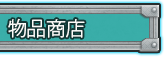
<style>
.page{position:relative;width:164px;height:57px}
.page>*{position:absolute;margin:0}
.t1{font:20px "GothicMB101Pr6N-Light";color:#fbfbf9}
</style>
<div class="page">
<p class="t1" style="left:8px;top:18px;width:77px;height:20px">物品商店</p>
</div>
